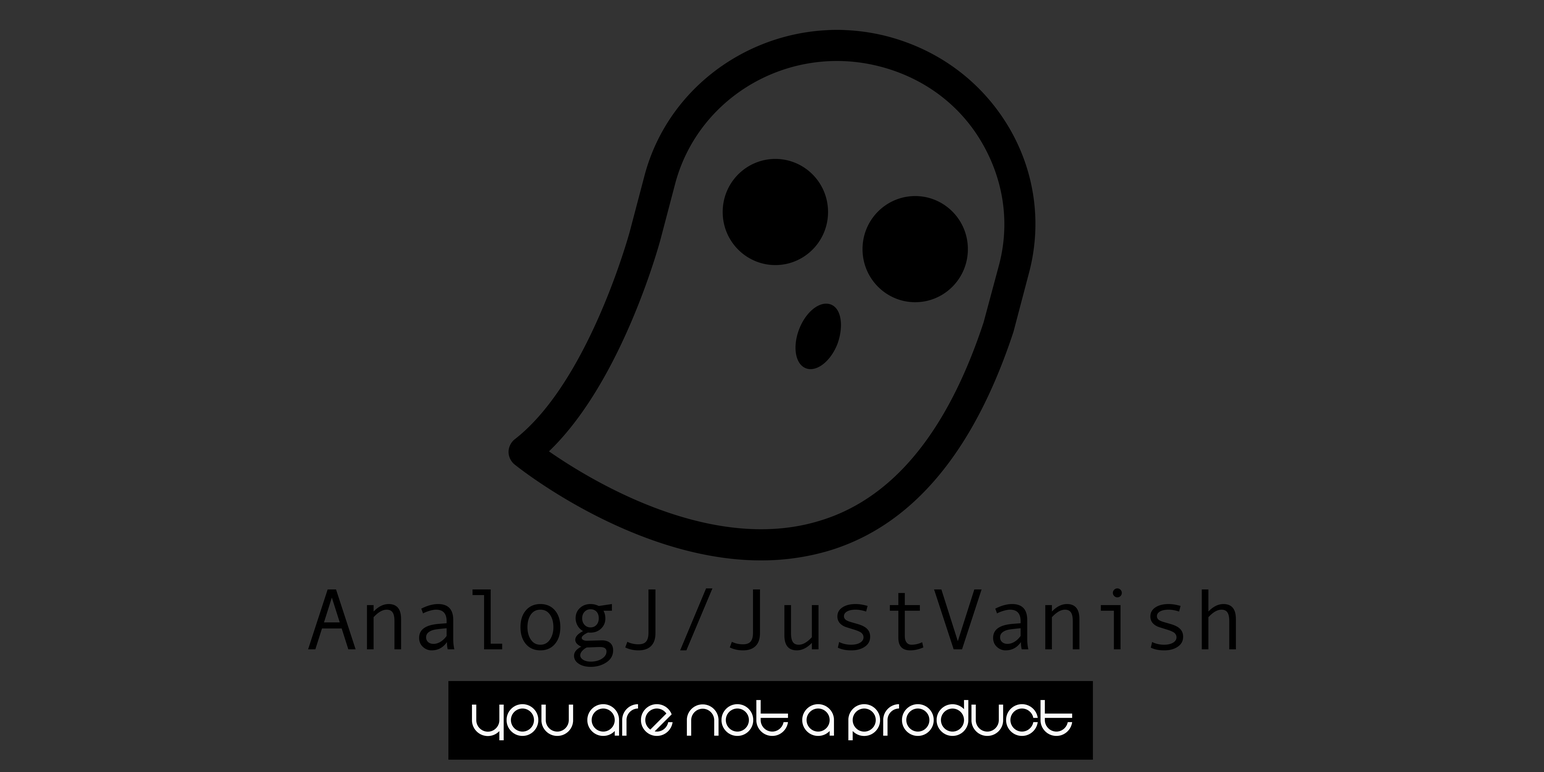
<style>
.page{position:relative;width:1544px;height:772px;background:#333333}
.page>*{position:absolute;margin:0}
.t1{font:87px "AndaleMono";color:#000000}
.t2{font:58px "BDColonius";color:#fbfbfb}
</style>
<div class="page">
<p class="t1" style="left:308px;top:589px;width:928px;height:78px">AnalogJ/JustVanish</p>
<p class="t2" style="left:472px;top:700px;width:600px;height:40px">You are not a product</p>
</div>
